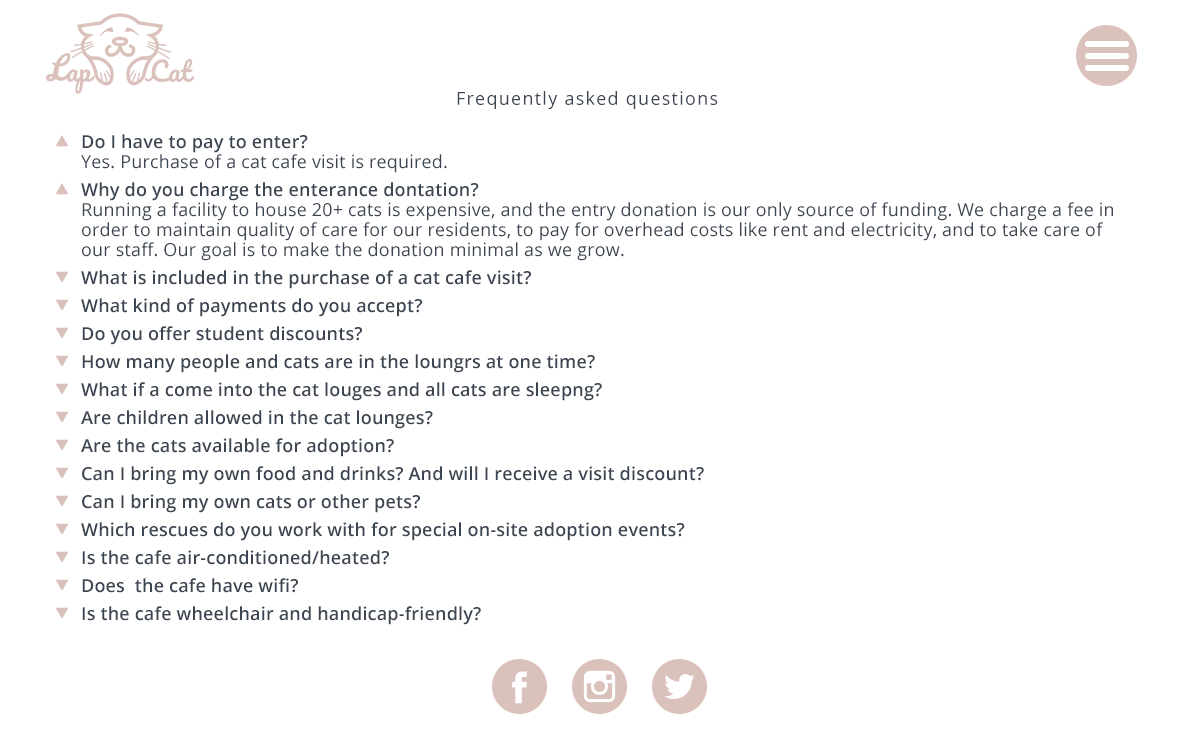
<style>
.page{position:relative;width:1200px;height:744px;background:#ffffff}
.page>*{position:absolute;margin:0}
.t1{font:18px/14px "OpenSans-Semibold";letter-spacing:0.01em;color:#3c4552}
.t2{font:18px "OpenSans";letter-spacing:0.07em;color:#3c4552}
.t3{font:18px/20px "OpenSans";letter-spacing:0.01em;color:#3c4552}
</style>
<div class="page">
<p class="t1" style="left:81px;top:91px;width:1032px;height:534px;text-align:center"><span class="t2">Frequently asked questions<br><br> </span>Do I have to pay to enter?<br> <span class="t3">Yes. Purchase of a cat cafe visit is required.<br><br> </span>Why do you charge the enterance dontation?<br> <span class="t3">Running a facility to house 20+ cats is expensive, and the entry donation is our only source of funding. We charge a fee in    order to maintain quality of care for our residents, to pay for overhead costs like rent and electricity, and to take care of    our staff. Our goal is to make the donation minimal as we grow.<br><br> </span>What is included in the purchase of a cat cafe visit?<br><br> What kind of payments do you accept?<br><br> Do you offer student discounts? <br><br> How many people and cats are in the loungrs at one time?<br><br> What if a come into the cat louges and all cats are sleepng?<br><br> Are children allowed in the cat lounges?<br><br> Are the cats available for adoption?<br><br> Can I bring my own food and drinks? And will I receive a visit discount?<br><br> Can I bring my own cats or other pets?<br><br> Which rescues do you work with for special on-site adoption events?<br><br> Is the cafe air-conditioned/heated?<br><br> Does  the cafe have wifi?<br> <br> Is the cafe wheelchair and handicap-friendly?</p>
</div>
